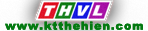
<style>
.page{position:relative;width:148px;height:31px}
.page>*{position:absolute;margin:0}
.t1{font:11.2px "HP-Arial-Black-Regular";letter-spacing:0.1em;color:#037910}
</style>
<div class="page">
<p class="t1" style="left:5px;top:21px;width:138px;height:9px">www.ktthehien.com</p>
<p class="t1" style="left:5px;top:21px;width:138px;height:9px">www.ktthehien.com</p>
</div>
